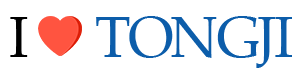
<style>
.page{position:relative;width:301px;height:71px;background:#ffffff}
.page>*{position:absolute;margin:0}
.t1{font:58px "PalatinoLinotype-Roman";letter-spacing:-0.05em;color:#0c5daa}
.t2{font:58px "PalatinoLinotype-Roman";letter-spacing:-0.05em;color:#000000}
</style>
<div class="page">
<p class="t1" style="left:10px;top:16px;width:282px;height:52px"><span class="t2">I      </span>TONGJI</p>
</div>
